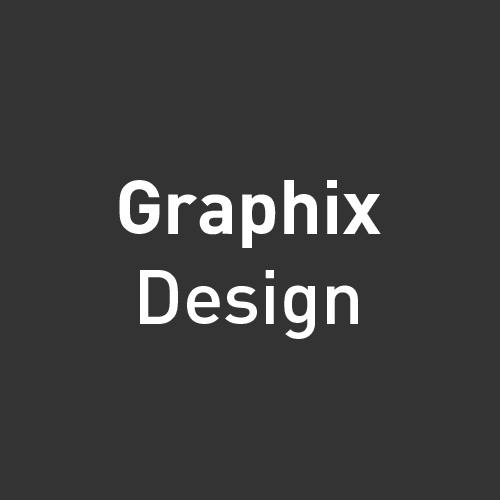
<style>
.page{position:relative;width:500px;height:500px;background:#333333}
.page>*{position:absolute;margin:0}
.t1{font:75px "DINPro-Bold";color:#ffffff}
.t2{font:75px "DINPro-Medium";color:#ffffff}
</style>
<div class="page">
<p class="t1" style="left:119px;top:180px;width:262px;height:159px;text-align:center">Graphix <span class="t2">Design</span></p>
</div>
